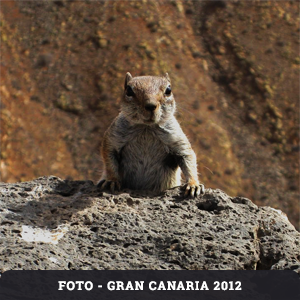
<style>
.page{position:relative;width:300px;height:300px}
.page>*{position:absolute;margin:0}
.t1{font:12px "RobotoSlab-Bold";letter-spacing:0.075em;color:#ffffff}
</style>
<div class="page">
<p class="t1" style="left:58px;top:281px;width:184px;height:10px">FOTO - GRAN CANARIA 2012</p>
</div>
